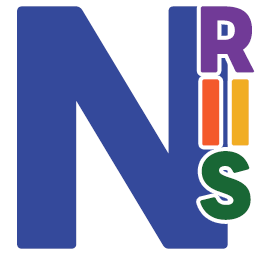
<style>
.page{position:relative;width:256px;height:256px;background:#34499b}
.page>*{position:absolute;margin:0}
.t1{font:330px "LINESeedSansTH-ExtraBold";color:#34499b}
.t2{font:90px/73px "LINESeedSansTH-ExtraBold";color:#713a97}
.t3{font:90px/73px "LINESeedSansTH-ExtraBold";color:#f4592b}
.t4{font:90px/73px "LINESeedSansTH-ExtraBold";color:#f1ad24}
.t5{font:90px/73px "LINESeedSansTH-ExtraBold";color:#196735}
</style>
<div class="page">
<p class="t1" style="left:17px;top:6px;width:211px;height:243px">N</p>
<p class="t2" style="left:200px;top:6px;width:55px;height:214px;text-align:center">R<br><span class="t3">I</span><span class="t4">I<br></span><span class="t5">S</span></p>
</div>
